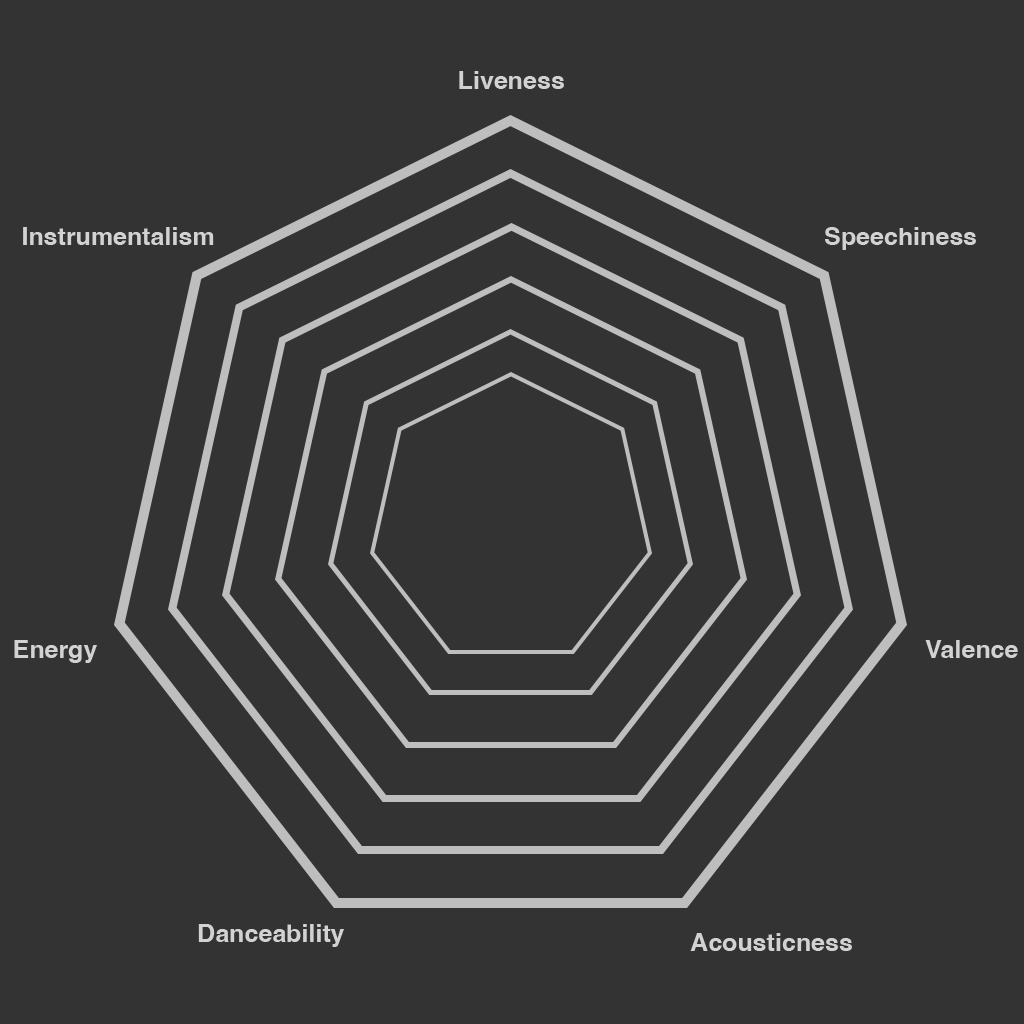
<style>
.page{position:relative;width:1024px;height:1024px;background:#333333}
.page>*{position:absolute;margin:0}
.t1{font:25px "Helvetica-Bold";color:#d2d2d2}
</style>
<div class="page">
<p class="t1" style="left:459px;top:71px;width:105px;height:18px">Liveness</p>
<p class="t1" style="left:23px;top:227px;width:191px;height:18px">Instrumentalism</p>
<p class="t1" style="left:825px;top:227px;width:151px;height:23px">Speechiness</p>
<p class="t1" style="left:14px;top:640px;width:83px;height:23px">Energy</p>
<p class="t1" style="left:925px;top:640px;width:93px;height:18px">Valence</p>
<p class="t1" style="left:198px;top:924px;width:146px;height:23px">Danceability</p>
<p class="t1" style="left:690px;top:933px;width:162px;height:18px">Acousticness</p>
</div>
